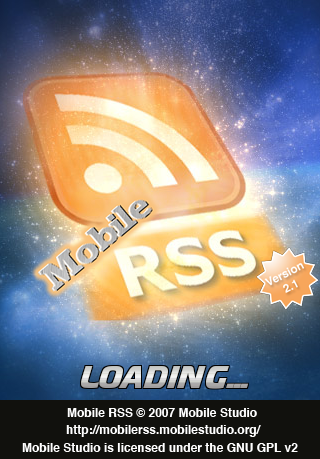
<style>
.page{position:relative;width:320px;height:459px}
.page>*{position:absolute;margin:0}
.t1{font:12px "Helvetica-Bold";color:#ffffff}
</style>
<div class="page">
<p class="t1" style="left:67px;top:408px;width:190px;height:9px">Mobile RSS © 2007 Mobile Studio</p>
<p class="t1" style="left:66px;top:425px;width:195px;height:12px">http://mobilerss.mobilestudio.org/</p>
<p class="t1" style="left:22px;top:443px;width:276px;height:9px">Mobile Studio is licensed under the GNU GPL v2</p>
</div>
